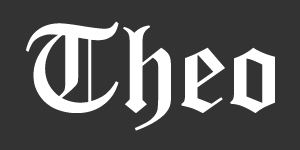
<style>
.page{position:relative;width:300px;height:150px;background:#333333}
.page>*{position:absolute;margin:0}
.t1{font:125px "OldEnglishTextMT";color:#ffffff}
</style>
<div class="page">
<p class="t1" style="left:26px;top:21px;width:249px;height:110px">Theo</p>
</div>
